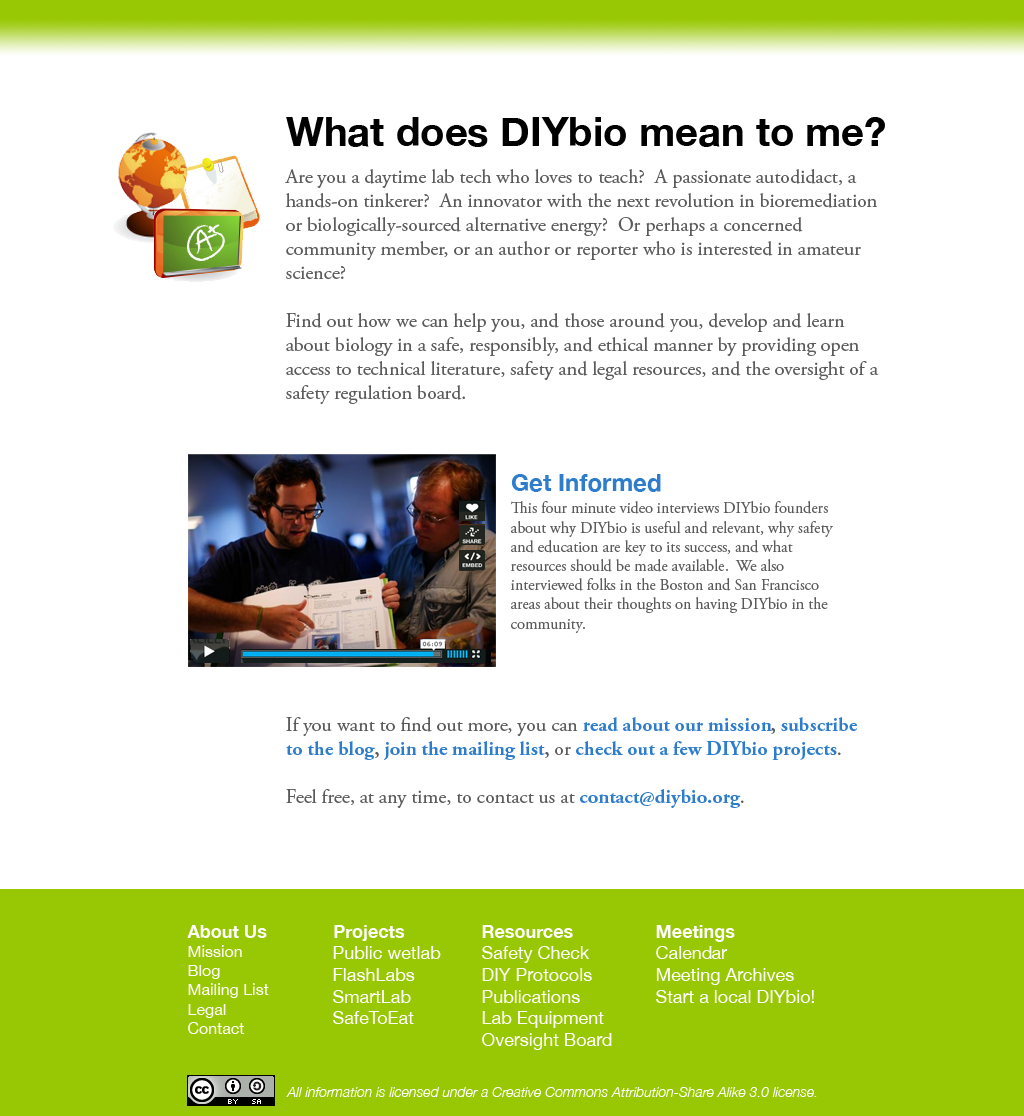
<style>
.page{position:relative;width:1024px;height:1116px;background:#ffffff}
.page>*{position:absolute;margin:0}
.t1{font:40px "HelveticaNeue-Bold";color:#000000}
.t2{font:20px "AGaramondPro-Regular";color:#5b5b5b}
.t3{font:24px "HelveticaNeue-Bold";color:#2e7dcd}
.t4{font:16px "AGaramondPro-Regular";color:#5b5b5b}
.t5{font:20px "AGaramondPro-Bold";color:#2e7dcd}
.t6{font:20px "AGaramondPro-Bold";color:#5b5b5b}
.t7{font:16px "HelveticaNeue";color:#ffffff}
.t8{font:18px "HelveticaNeue-Bold";color:#ffffff}
.t9{font:18px "HelveticaNeue";color:#ffffff}
.t10{font:14px "HelveticaNeue-LightItalic";color:#ffffff}
</style>
<div class="page">
<p class="t1" style="left:286px;top:117px;width:599px;height:30px">What does DIYbio mean to me?</p>
<p class="t2" style="left:285px;top:169px;width:594px;height:235px">Are you a daytime lab tech who loves to teach?  A passionate autodidact, a hands-on tinkerer?  An innovator with the next revolution in bioremediation or biologically-sourced alternative energy?  Or perhaps a concerned community member, or an author or reporter who is interested in amateur science?<br><br>Find out how we can help you, and those around you, develop and learn about biology in a safe, responsibly, and ethical manner by providing open access to technical literature, safety and legal resources, and the oversight of a safety regulation board.</p>
<p class="t3" style="left:511px;top:474px;width:150px;height:18px">Get Informed</p>
<p class="t4" style="left:511px;top:501px;width:322px;height:132px">This four minute video interviews DIYbio founders about why DIYbio is useful and relevant, why safety and education are key to its success, and what resources should be made available.  We also interviewed folks in the Boston and San Francisco areas about their thoughts on having DIYbio in the community.</p>
<p class="t2" style="left:286px;top:717px;width:571px;height:91px">If you want to find out more, you can <span class="t5">read about our mission</span><span class="t6">, </span><span class="t5">subscribe to the blog</span><span class="t6">, </span><span class="t5">join the mailing list</span><span class="t6">, </span>or <span class="t5">check out a few DIYbio projects</span>.<br><br>Feel free, at any time, to contact us at <span class="t5">contact@diybio.org</span>.</p>
<p class="t7" style="left:187px;top:925px;width:82px;height:109px"><span class="t8">About Us<br></span>Mission<br>Blog<br>Mailing List<br>Legal<br>Contact</p>
<p class="t9" style="left:333px;top:925px;width:108px;height:99px"><span class="t8">Projects<br></span>Public wetlab<br>FlashLabs<br>SmartLab<br>SafeToEat</p>
<p class="t9" style="left:482px;top:925px;width:130px;height:125px"><span class="t8">Resources<br></span>Safety Check<br>DIY Protocols<br>Publications<br>Lab Equipment<br>Oversight Board</p>
<p class="t9" style="left:656px;top:925px;width:158px;height:78px"><span class="t8">Meetings<br></span>Calendar<br>Meeting Archives<br>Start a local DIYbio!</p>
<p class="t10" style="left:286px;top:1087px;width:531px;height:10px">All information is licensed under a Creative Commons Attribution-Share Alike 3.0 license.</p>
</div>
